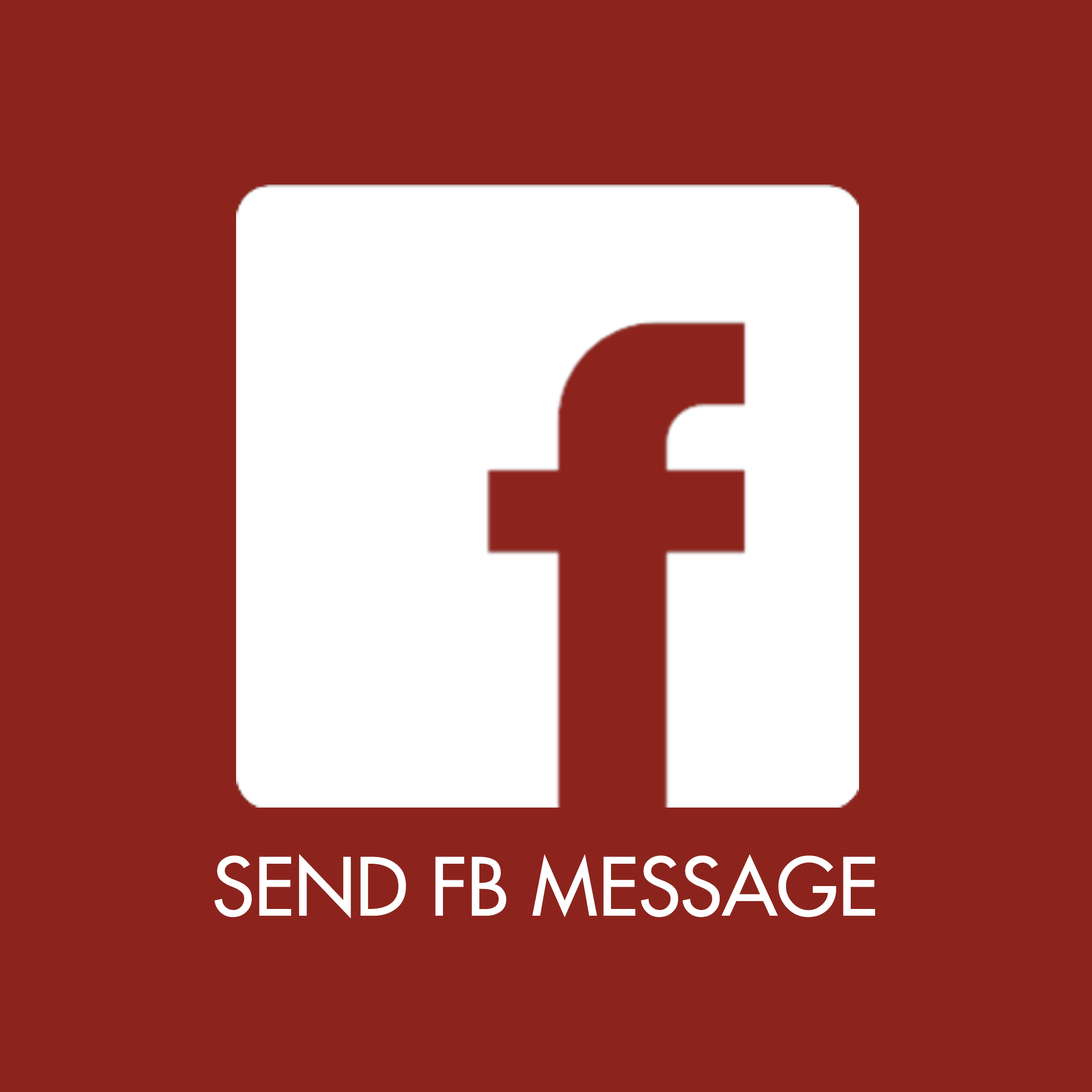
<style>
.page{position:relative;width:1092px;height:1092px;background:#8c241d}
.page>*{position:absolute;margin:0}
.t1{font:78px "FuturaLT";color:#ffffff}
</style>
<div class="page">
<p class="t1" style="left:214px;top:854px;width:661px;height:64px">SEND FB MESSAGE</p>
</div>
